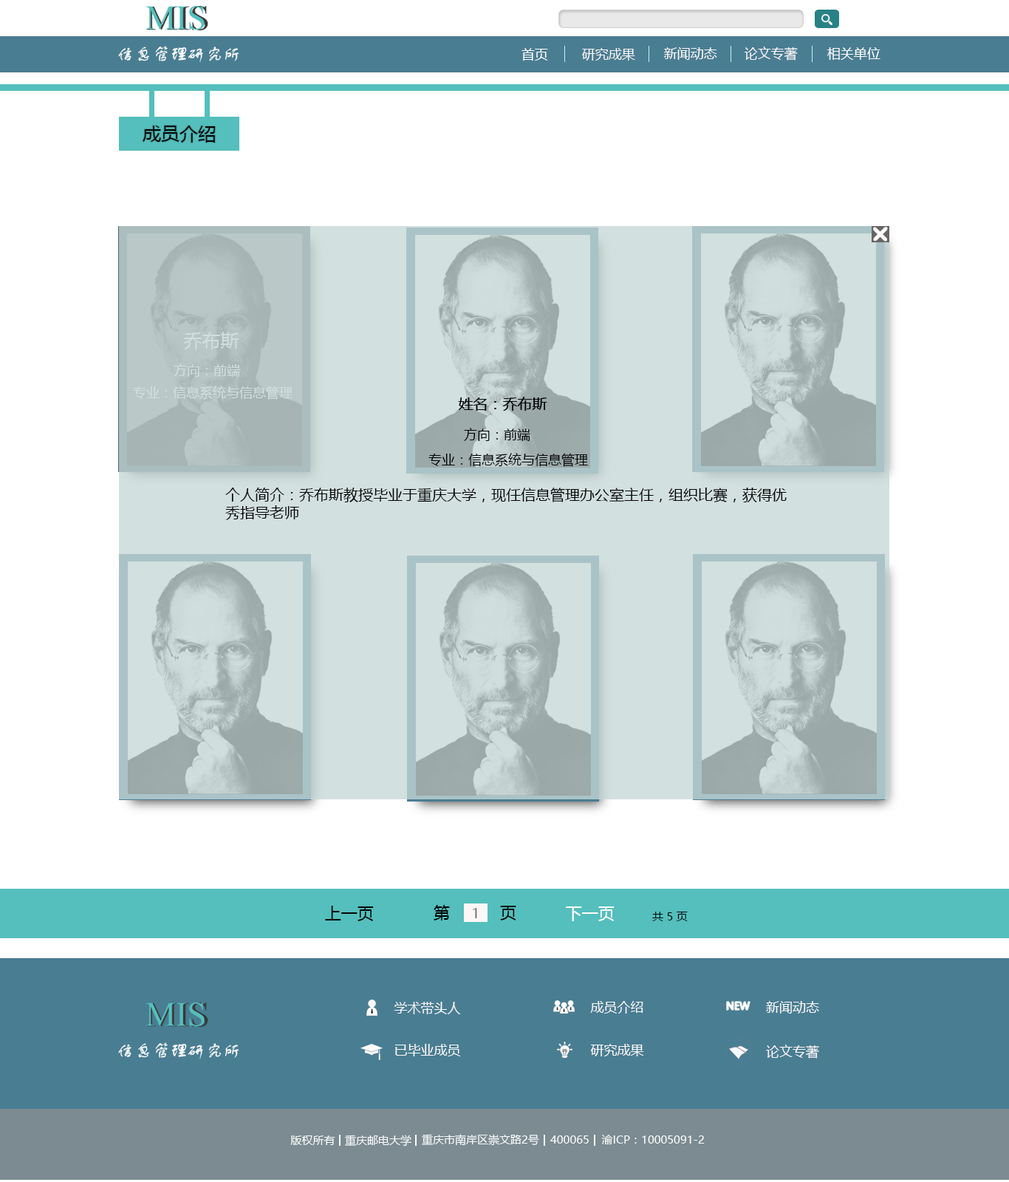
<style>
.page{position:relative;width:1009px;height:1182px;background:#ffffff}
.page>*{position:absolute;margin:0}
.t1{font:13.3px "MicrosoftYaHei";color:#fefefe}
.t2{font:13.3px "MicrosoftYaHei";color:#f8f4f4}
.t3{font:13.3px "MicrosoftYaHei";color:#fefafa}
.t4{font:13.3px "MicrosoftYaHei";color:#fcf9f9}
.t5{font:13.3px "MicrosoftYaHei";color:#fdfcfc}
.t6{font:18.5px "MicrosoftYaHei";color:#060606}
.t7{font:18.5px "MicrosoftYaHei";color:#d0dfde}
.t8{font:13.3px "MicrosoftYaHei";color:#d0dfde}
.t9{font:14.8px "MicrosoftYaHei";color:#070707}
.t10{font:13.3px "MicrosoftYaHei";color:#030303}
.t11{font:13.3px "MicrosoftYaHei";color:#050505}
.t12{font:14.8px "MicrosoftYaHei";color:#060606}
.t13{font:16.3px "MicrosoftYaHei";color:#060606}
.t14{font:16.3px "MicrosoftYaHei";color:#020202}
.t15{font:13.3px "MicrosoftYaHei";color:#686767}
.t16{font:16.3px "MicrosoftYaHei";color:#f9fafc}
.t17{font:11.1px "MicrosoftYaHei";color:#060606}
.t18{font:13.3px "MicrosoftYaHei";color:#fbf8f8}
.t19{font:13.3px "MicrosoftYaHei";color:#fcfafa}
.t20{font:13.3px "MicrosoftYaHei";color:#fdf8f8}
.t21{font:11.1px "MicrosoftYaHei";color:#f9fafc}
</style>
<div class="page">
<p class="t1" style="left:521px;top:48px;width:27px;height:13px">首页</p>
<p class="t2" style="left:581px;top:48px;width:54px;height:13px">研究成果</p>
<p class="t3" style="left:664px;top:47px;width:53px;height:13px">新闻动态</p>
<p class="t4" style="left:744px;top:47px;width:54px;height:14px">论文专著</p>
<p class="t5" style="left:827px;top:47px;width:53px;height:13px">相关单位</p>
<p class="t6" style="left:143px;top:126px;width:73px;height:17px">成员介绍</p>
<p class="t7" style="left:183px;top:332px;width:56px;height:17px">乔布斯</p>
<p class="t8" style="left:174px;top:363px;width:66px;height:14px">方向：前端</p>
<p class="t8" style="left:133px;top:386px;width:160px;height:14px">专业：信息系统与信息管理</p>
<p class="t9" style="left:458px;top:397px;width:89px;height:14px">姓名：乔布斯</p>
<p class="t9" style="left:458px;top:397px;width:89px;height:14px">姓名：乔布斯</p>
<p class="t10" style="left:464px;top:428px;width:66px;height:13px">方向：前端</p>
<p class="t11" style="left:428px;top:453px;width:160px;height:14px">专业：信息系统与信息管理</p>
<p class="t12" style="left:225px;top:488px;width:562px;height:32px">个人简介：乔布斯教授毕业于重庆大学，现任信息管理办公室主任，组织比赛，获得优秀指导老师</p>
<p class="t13" style="left:325px;top:906px;width:49px;height:15px">上一页</p>
<p class="t14" style="left:434px;top:905px;width:16px;height:15px">第</p>
<p class="t14" style="left:500px;top:906px;width:16px;height:14px">页</p>
<p class="t15" style="left:473px;top:908px;width:4px;height:10px">1</p>
<p class="t16" style="left:566px;top:906px;width:49px;height:15px">下一页</p>
<p class="t17" style="left:652px;top:911px;width:36px;height:10px">共 5 页</p>
<p class="t18" style="left:394px;top:1002px;width:67px;height:12px">学术带头人</p>
<p class="t18" style="left:590px;top:1001px;width:53px;height:12px">成员介绍</p>
<p class="t19" style="left:766px;top:1001px;width:53px;height:12px">新闻动态</p>
<p class="t18" style="left:394px;top:1044px;width:67px;height:12px">已毕业成员</p>
<p class="t18" style="left:590px;top:1044px;width:54px;height:12px">研究成果</p>
<p class="t20" style="left:766px;top:1044px;width:53px;height:14px">论文专著</p>
<p class="t21" style="left:422px;top:1134px;width:117px;height:12px">重庆市南岸区崇文路2号</p>
<p class="t21" style="left:290px;top:1135px;width:45px;height:10px">版权所有</p>
<p class="t21" style="left:345px;top:1135px;width:66px;height:11px">重庆邮电大学</p>
<p class="t21" style="left:550px;top:1135px;width:39px;height:8px">400065</p>
<p class="t21" style="left:601px;top:1135px;width:104px;height:9px">渝ICP：10005091-2</p>
</div>
